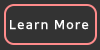
<style>
.page{position:relative;width:100px;height:50px;background:#333333}
.page>*{position:absolute;margin:0}
.t1{font:12.2px "NanumSquareB";letter-spacing:0.1em;color:#fffefe;scale:1.05 1}
</style>
<div class="page">
<p class="t1" style="left:10px;top:20px;width:79px;height:10px">Learn More</p>
</div>
